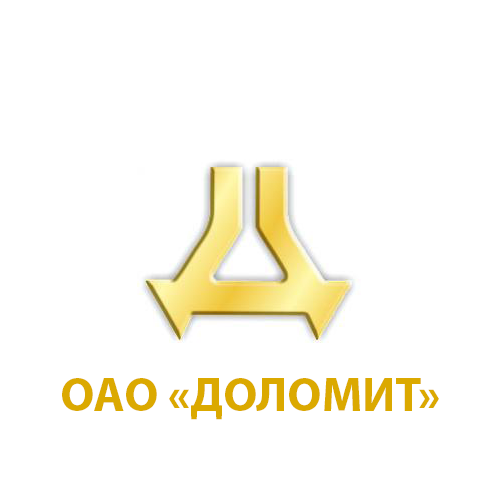
<style>
.page{position:relative;width:500px;height:500px;background:#ffffff}
.page>*{position:absolute;margin:0}
.t1{font:48px "MyriadPro-Bold";color:#dba900}
</style>
<div class="page">
<p class="t1" style="left:62px;top:378px;width:377px;height:42px">ОАО «ДОЛОМИТ»</p>
</div>
